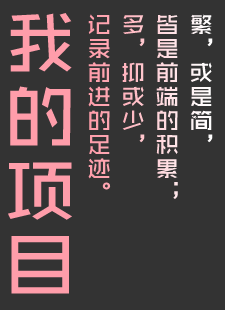
<style>
.page{position:relative;width:225px;height:310px;background:#333333}
.page>*{position:absolute;margin:0}
.t1{font:72px/74px "ZHSCNMT--GBK1-0";color:#ff9daa}
.t2{font:24px/34px "ZHSCNMT--GBK1-0"}
</style>
<div class="page">
<p class="t1" style="left:8px;top:13px;width:64px;height:281px">我<br>的<br>项<br>目</p>
<p class="t2" style="left:88px;top:14px;width:125px;height:185px">繁，或是简，<br>皆是前端的积累；<br>多，抑或少，<br>记录前进的足迹。</p>
</div>
